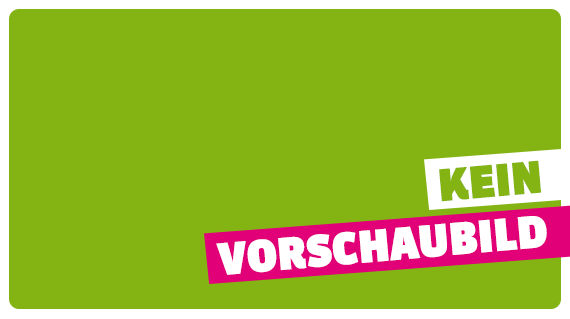
<style>
.page{position:relative;width:570px;height:319px;background:#84b414}
.page>*{position:absolute;margin:0}
.t1{font:43.1px "SanukOT-Fat";letter-spacing:-0.025em;color:#84b414;font-weight:bold}
.t2{font:43.1px "SanukOT-Fat";letter-spacing:-0.025em;color:#ffffff;font-weight:bold}
</style>
<div class="page">
<p class="t1" style="left:439px;top:160px;width:102px;height:42px;rotate:-5deg">KEIN</p>
<p class="t2" style="left:216px;top:216px;width:331px;height:59px;rotate:-5deg">VORSCHAUBILD</p>
</div>
